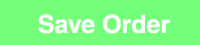
<style>
.page{position:relative;width:200px;height:45px;background:#73ff7a}
.page>*{position:absolute;margin:0}
.t1{font:25px "TeXGyreHeros-Bold";color:#fbfbfb}
</style>
<div class="page">
<p class="t1" style="left:38px;top:14px;width:132px;height:20px">Save Order</p>
</div>
